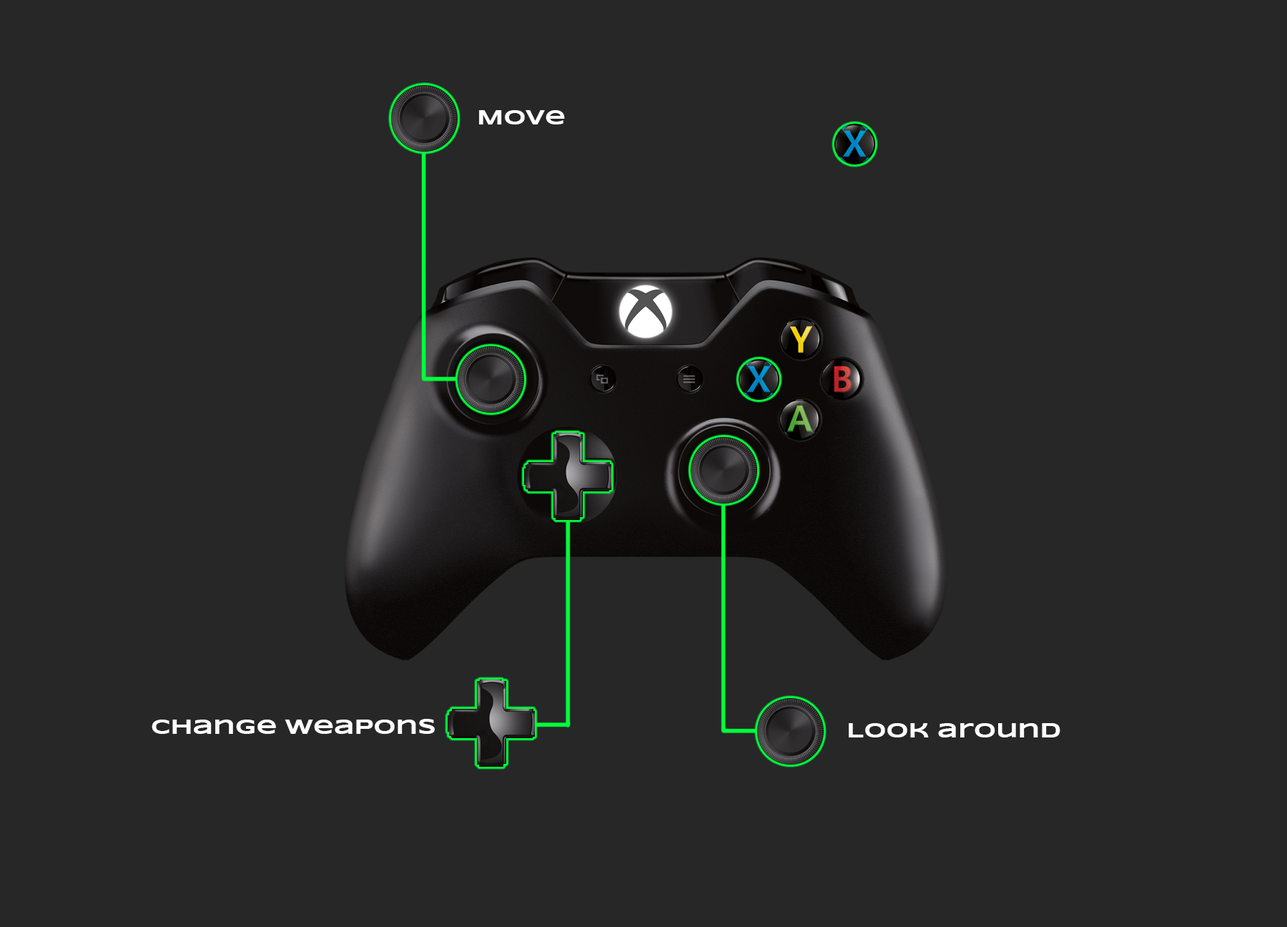
<style>
.page{position:relative;width:1287px;height:927px;background:#272727}
.page>*{position:absolute;margin:0}
.t1{font:21.4px "Syncopate-Bold";color:#ffffff}
</style>
<div class="page">
<p class="t1" style="left:479px;top:110px;width:86px;height:14px">Move</p>
<p class="t1" style="left:152px;top:719px;width:283px;height:15px">Change Weapons</p>
<p class="t1" style="left:849px;top:723px;width:211px;height:14px">Look around</p>
</div>
